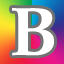
<style>
.page{position:relative;width:64px;height:64px;background:#ffffff}
.page>*{position:absolute;margin:0}
.t1{font:72px "Pescadero-Bold";color:#ffffff}
</style>
<div class="page">
<p class="t1" style="left:12px;top:8px;width:42px;height:48px">B</p>
</div>
